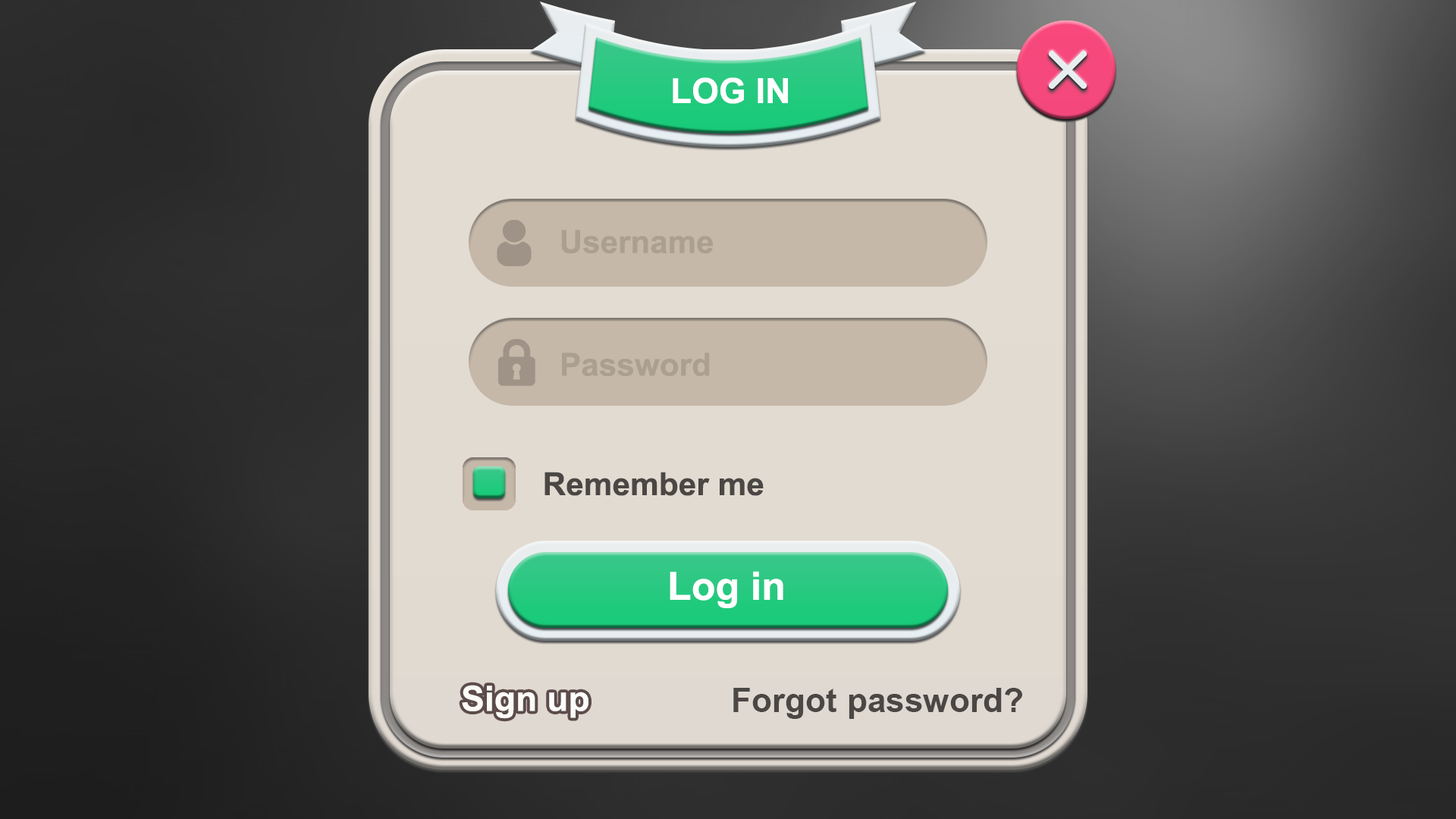
<style>
.page{position:relative;width:1456px;height:819px}
.page>*{position:absolute;margin:0}
.t1{font:34.9px "Arial-BoldMT";color:#ffffff}
.t2{font:31.8px "Arial-BoldMT";color:#aa9f91}
.t3{font:31.8px "Arial-BoldMT";color:#4a4744}
.t4{font:39.4px "Arial-BoldMT";color:#ffffff}
.t5{font:33.4px "Arial-BoldMT";color:#4a4744}
</style>
<div class="page">
<p class="t1" style="left:673px;top:77px;width:115px;height:27px">LOG IN</p>
<p class="t2" style="left:561px;top:230px;width:152px;height:24px">Username</p>
<p class="t2" style="left:562px;top:353px;width:148px;height:23px">Password</p>
<p class="t3" style="left:544px;top:472px;width:220px;height:24px">Remember me</p>
<p class="t4" style="left:670px;top:571px;width:113px;height:37px">Log in</p>
<p class="t1" style="left:462px;top:685px;width:126px;height:34px">Sign up</p>
<p class="t5" style="left:733px;top:688px;width:289px;height:31px">Forgot password?</p>
</div>
